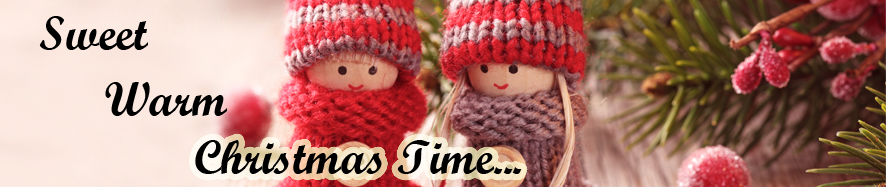
<style>
.page{position:relative;width:886px;height:187px}
.page>*{position:absolute;margin:0}
.t1{font:48px "ScriptMTBold";color:#000000}
</style>
<div class="page">
<p class="t1" style="left:39px;top:16px;width:109px;height:34px">Sweet</p>
<p class="t1" style="left:105px;top:82px;width:122px;height:34px">Warm</p>
<p class="t1" style="left:195px;top:140px;width:327px;height:34px">Christmas Time...</p>
</div>
